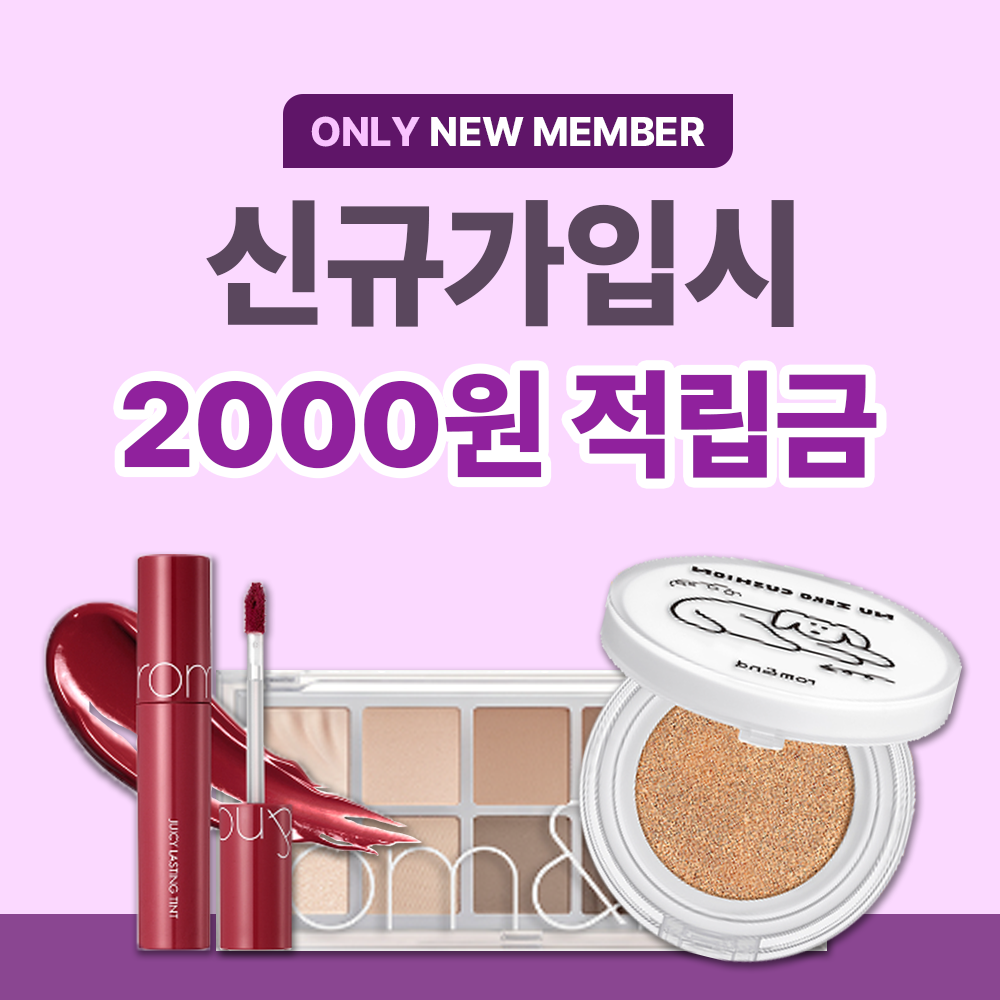
<style>
.page{position:relative;width:1000px;height:1000px;background:#fbd9ff}
.page>*{position:absolute;margin:0}
.t1{font:41px "Pretendard-ExtraBold";letter-spacing:-0.01em;color:#ffffff}
.t2{font:41px "Pretendard-ExtraBold";letter-spacing:-0.01em;color:#f9c2ff}
.t3{font:140px "Pretendard-Black";letter-spacing:-0.01em;color:#5a475d}
.t4{font:120px "Pretendard-Black";letter-spacing:-0.01em;color:#90219d}
</style>
<div class="page">
<p class="t1" style="left:311px;top:116px;width:394px;height:31px"><span class="t2">ONLY</span> NEW MEMBER</p>
<p class="t3" style="left:206px;top:200px;width:588px;height:127px">신규가입시</p>
<p class="t4" style="left:123px;top:370px;width:754px;height:109px">2000원 적립금</p>
</div>
